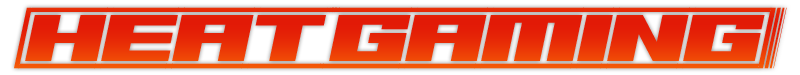
<style>
.page{position:relative;width:800px;height:75px}
.page>*{position:absolute;margin:0}
.t1{font:60.4px "62DRAGZ";color:#e72a06}
</style>
<div class="page">
<p class="t1" style="left:14px;top:7px;width:773px;height:62px">(HEAT---GAMING]</p>
</div>
